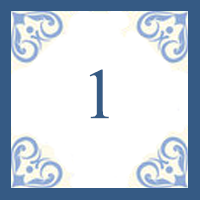
<style>
.page{position:relative;width:200px;height:200px;background:#ffffff}
.page>*{position:absolute;margin:0}
.t1{font:72px "TimesNewRomanPSMT";color:#355a84}
</style>
<div class="page">
<p class="t1" style="left:89px;top:69px;width:20px;height:50px">1</p>
</div>
